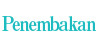
<style>
.page{position:relative;width:97px;height:43px;background:#ffffff}
.page>*{position:absolute;margin:0}
.t1{font:20px "RyuminPro-ExBold";letter-spacing:-0.08em;color:#1dbcc0;scale:0.9 1}
</style>
<div class="page">
<p class="t1" style="left:2px;top:16px;width:94px;height:15px">Penembakan</p>
</div>
